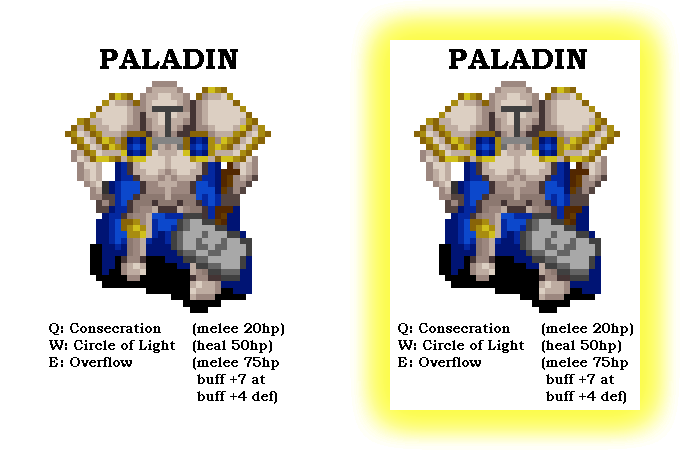
<style>
.page{position:relative;width:680px;height:450px;background:#ffffff}
.page>*{position:absolute;margin:0}
.t1{font:30px "BookmanOldStyle-Bold";color:#000000}
.t2{font:14px "BookmanOldStyle-Bold";color:#000000}
</style>
<div class="page">
<p class="t1" style="left:100px;top:49px;width:138px;height:20px">PALADIN</p>
<p class="t1" style="left:449px;top:49px;width:138px;height:20px">PALADIN</p>
<p class="t2" style="left:49px;top:323px;width:235px;height:81px">Q: Consecration (melee 20hp)<br>W: Circle of Light (heal 50hp)<br>E: Overflow  (melee 75hp<br>     buff +7 at<br>     buff +4 def)</p>
<p class="t2" style="left:398px;top:323px;width:235px;height:81px">Q: Consecration (melee 20hp)<br>W: Circle of Light (heal 50hp)<br>E: Overflow  (melee 75hp<br>     buff +7 at<br>     buff +4 def)</p>
</div>
